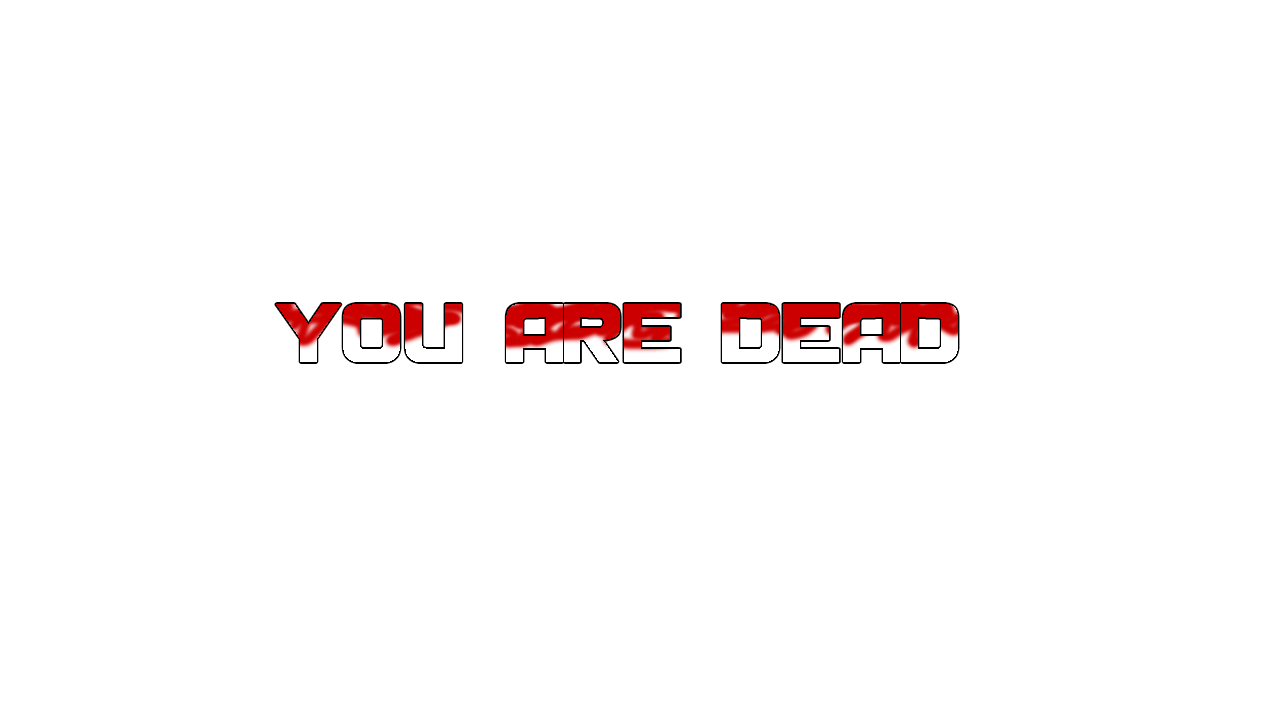
<style>
.page{position:relative;width:1280px;height:720px;background:#ffffff}
.page>*{position:absolute;margin:0}
.t1{font:72px "DieHundNormal"}
</style>
<div class="page">
<p class="t1" style="left:276px;top:304px;width:682px;height:58px">You Are Dead</p>
</div>
